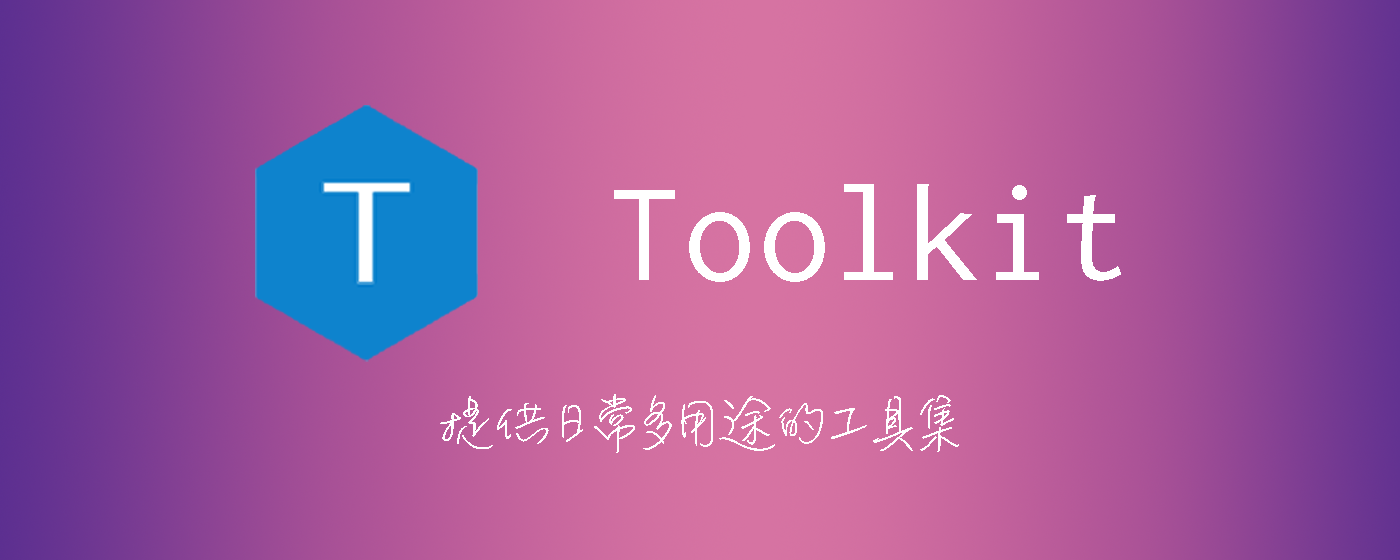
<style>
.page{position:relative;width:1400px;height:560px}
.page>*{position:absolute;margin:0}
.t1{font:125px "InconsolataForPowerline-dz";color:#ffffff}
.t2{font:66.7px "MLingWaiMedium-SC";color:#ffffff}
</style>
<div class="page">
<p class="t1" style="left:614px;top:184px;width:507px;height:98px">Toolkit</p>
<p class="t2" style="left:440px;top:394px;width:519px;height:59px">提供日常多用途的工具集</p>
</div>
